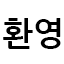
<style>
.page{position:relative;width:64px;height:64px;background:#ffffff}
.page>*{position:absolute;margin:0}
.t1{font:33.3px "NanumGothicBold";color:#000000}
</style>
<div class="page">
<p class="t1" style="left:3px;top:18px;width:58px;height:31px">환영</p>
</div>
